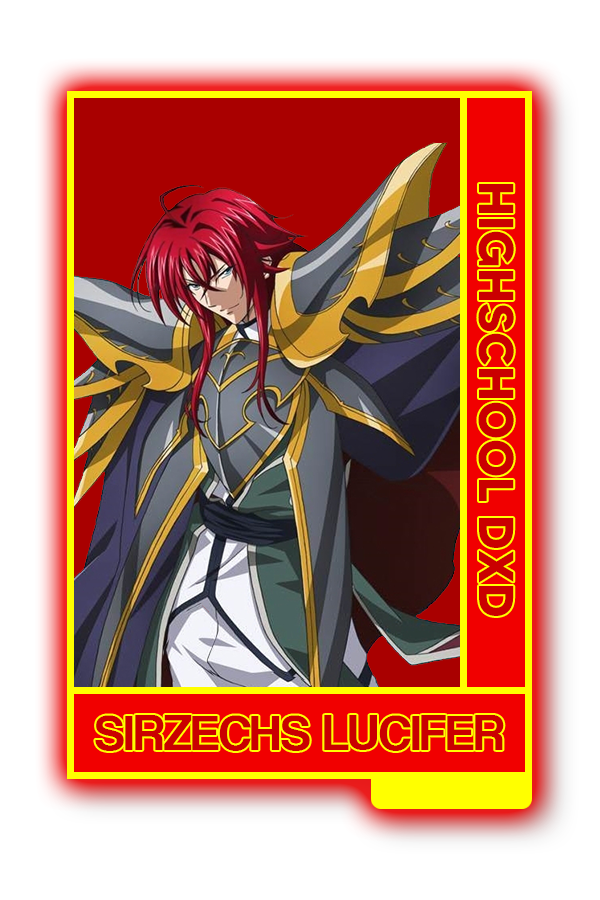
<style>
.page{position:relative;width:600px;height:900px;background:#ffffff}
.page>*{position:absolute;margin:0}
.t1{font:48.8px "MADETOMMY-Bold";color:#ca0000}
.t2{font:51.8px "CoolveticaRg-Regular";color:#ca0000}
</style>
<div class="page">
<p class="t1" style="left:478px;top:184px;width:36px;height:432px;rotate:90deg">HIGHSCHOOL DXD</p>
<p class="t2" style="left:95px;top:715px;width:409px;height:36px">SIRZECHS LUCIFER</p>
</div>
